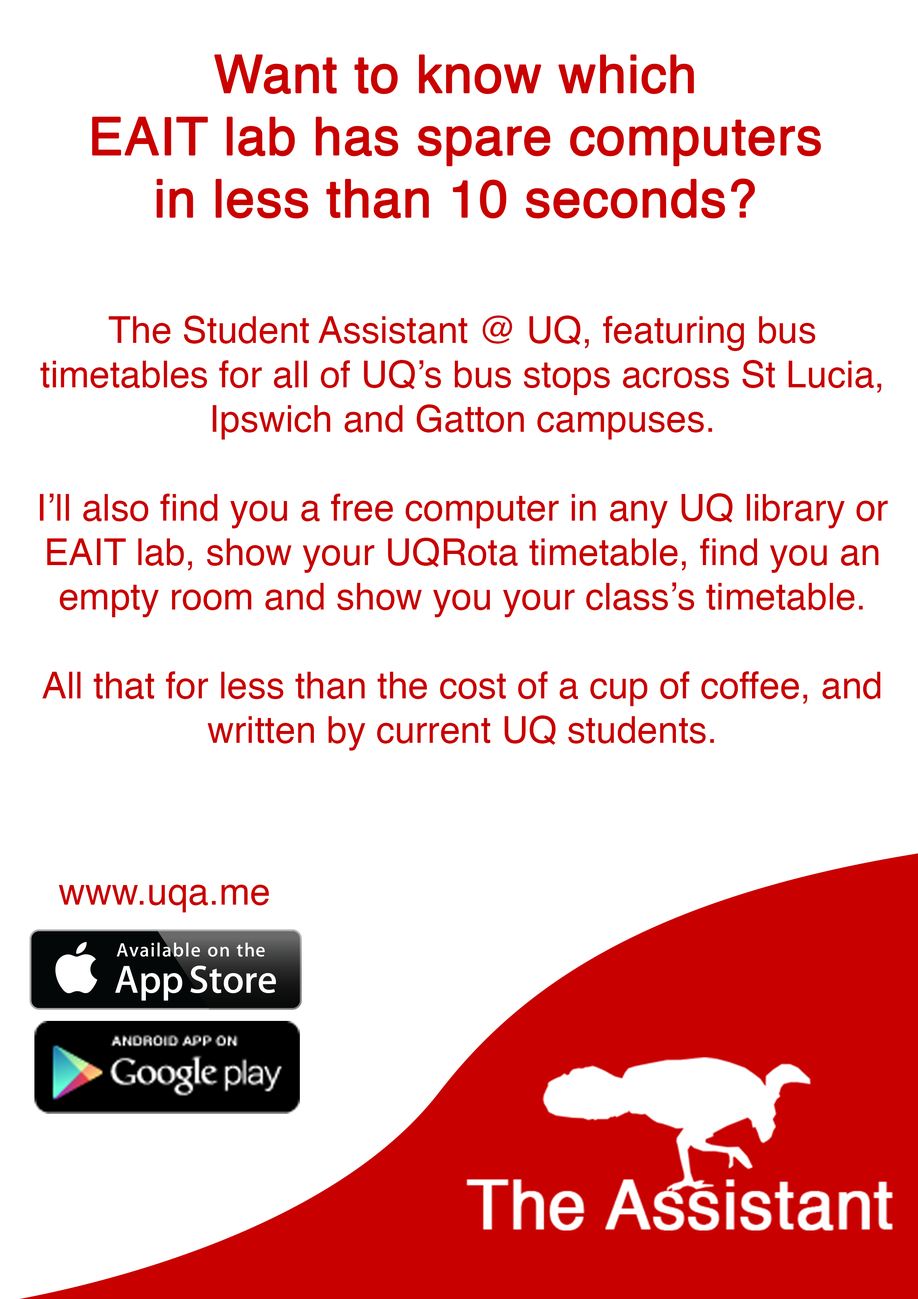
<style>
.page{position:relative;width:918px;height:1299px;background:#ffffff}
.page>*{position:absolute;margin:0}
.t1{font:51.8px "Helvetica";color:#c90000;font-weight:bold}
.t2{font:37px "Helvetica";color:#c90000}
</style>
<div class="page">
<p class="t1" style="left:92px;top:54px;width:729px;height:164px;text-align:center">Want to know which<br>EAIT lab has spare computers<br>in less than 10 seconds?</p>
<p class="t2" style="left:40px;top:315px;width:848px;height:435px;text-align:center">The Student Assistant @ UQ, featuring bus timetables for all of UQ’s bus stops across St Lucia, Ipswich and Gatton campuses.<br><br>I’ll also find you a free computer in any UQ library or EAIT lab, show your UQRota timetable, find you an empty room and show you your class’s timetable.<br><br>All that for less than the cost of a cup of coffee, and written by current UQ students.</p>
<p class="t2" style="left:59px;top:884px;width:210px;height:28px">www.uqa.me</p>
</div>
